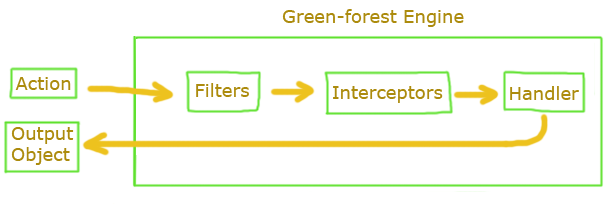
<style>
.page{position:relative;width:611px;height:209px;background:#ffffff}
.page>*{position:absolute;margin:0}
.t1{font:18px "Verdana";color:#ac8b0d}
</style>
<div class="page">
<p class="t1" style="left:282px;top:9px;width:182px;height:18px">Green-forest Engine</p>
<p class="t1" style="left:15px;top:77px;width:56px;height:13px">Action</p>
<p class="t1" style="left:196px;top:83px;width:53px;height:14px">Filters</p>
<p class="t1" style="left:333px;top:86px;width:110px;height:17px">Interceptors</p>
<p class="t1" style="left:510px;top:86px;width:69px;height:14px">Handler</p>
<p class="t1" style="left:11px;top:127px;width:63px;height:38px">Output <br>Object</p>
</div>
